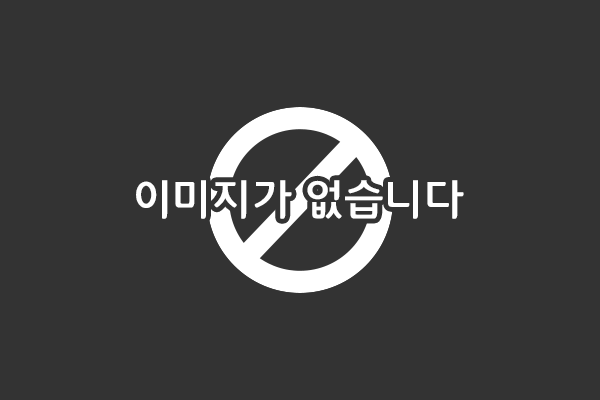
<style>
.page{position:relative;width:600px;height:400px;background:#333333}
.page>*{position:absolute;margin:0}
.t1{font:43.3px "12LotteMartDreamBold";color:#ffffff}
</style>
<div class="page">
<p class="t1" style="left:136px;top:180px;width:328px;height:39px">이미지가 없습니다</p>
</div>
